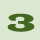
<style>
.page{position:relative;width:40px;height:40px;background:#dbe7d1}
.page>*{position:absolute;margin:0}
.t1{font:25px "LatinWide";color:#456721}
</style>
<div class="page">
<p class="t1" style="left:7px;top:13px;width:28px;height:19px">3</p>
</div>
